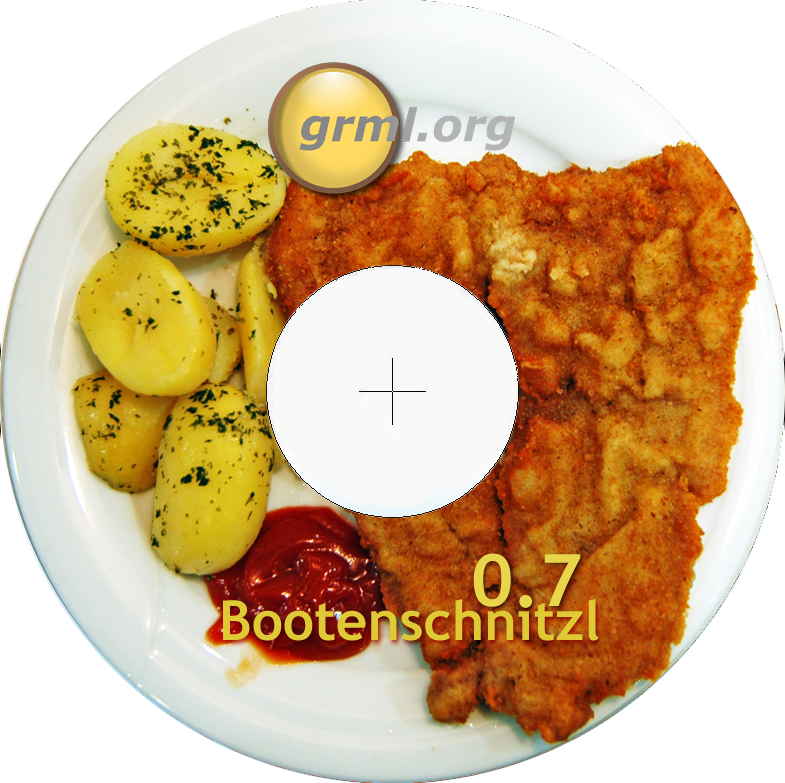
<style>
.page{position:relative;width:785px;height:783px;background:#ffffff}
.page>*{position:absolute;margin:0}
.t1{font:72px "TrebuchetMS-Bold";color:#e9d54a}
.t2{font:55px "TrebuchetMS-Bold";color:#dfc935}
</style>
<div class="page">
<p class="t1" style="left:473px;top:553px;width:108px;height:55px">0.7</p>
<p class="t2" style="left:223px;top:599px;width:376px;height:42px">Bootenschnitzl</p>
</div>
